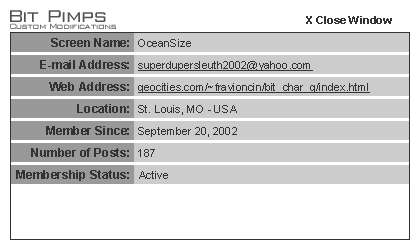
<style>
.page{position:relative;width:420px;height:250px;background:#ffffff}
.page>*{position:absolute;margin:0}
.t1{font:18px "WallStreet";letter-spacing:0.05em;color:#525252}
.t2{font:11px "Arial-BoldMT";color:#333333}
.t3{font:8px "WallStreet";letter-spacing:0.05em;color:#525252}
.t4{font:12px "Arial-BoldMT";color:#333333}
.t5{font:11px "ArialMT";color:#333333}
.t6{font:11px "ArialMT";color:#333333;text-decoration:underline}
</style>
<div class="page">
<p class="t1" style="left:10px;top:10px;width:96px;height:12px">Bit Pimps</p>
<p class="t2" style="left:306px;top:16px;width:86px;height:8px">X Close Window</p>
<p class="t3" style="left:10px;top:23px;width:106px;height:6px">Custom Modifications</p>
<p class="t4" style="left:51px;top:38px;width:78px;height:9px">Screen Name:</p>
<p class="t5" style="left:138px;top:39px;width:53px;height:8px">OceanSize</p>
<p class="t4" style="left:40px;top:60px;width:89px;height:9px">E-mail Address:</p>
<p class="t6" style="left:138px;top:61px;width:175px;height:10px">superdupersleuth2002@yahoo.com</p>
<p class="t4" style="left:49px;top:82px;width:80px;height:9px">Web Address:</p>
<p class="t6" style="left:138px;top:83px;width:232px;height:10px">geocities.com/~fravioncin/bit_char_g/index.html</p>
<p class="t4" style="left:77px;top:104px;width:52px;height:9px">Location:</p>
<p class="t5" style="left:138px;top:105px;width:99px;height:10px">St. Louis, MO - USA</p>
<p class="t4" style="left:46px;top:126px;width:83px;height:9px">Member Since:</p>
<p class="t5" style="left:138px;top:127px;width:99px;height:10px">September 20, 2002</p>
<p class="t4" style="left:31px;top:148px;width:98px;height:9px">Number of Posts:</p>
<p class="t5" style="left:138px;top:149px;width:17px;height:8px">187</p>
<p class="t4" style="left:16px;top:170px;width:113px;height:11px">Membership Status:</p>
<p class="t5" style="left:139px;top:171px;width:29px;height:8px">Active</p>
</div>
